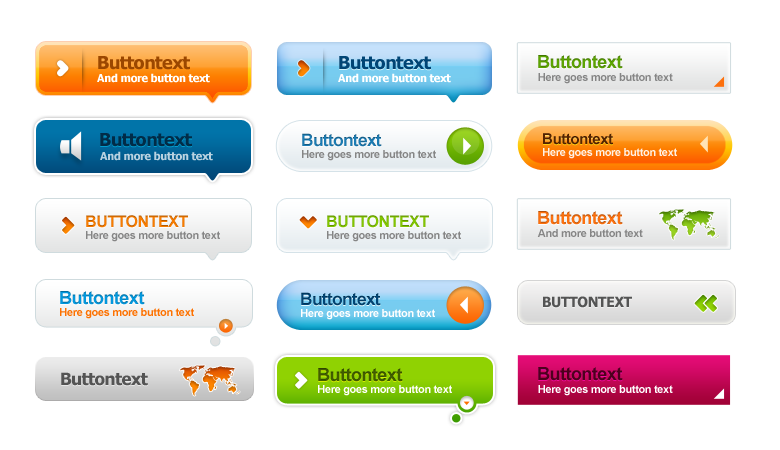
<style>
.page{position:relative;width:780px;height:450px;background:#ffffff}
.page>*{position:absolute;margin:0}
.t1{font:18px "Tahoma-Bold";letter-spacing:-0.03em;color:#9b4700}
.t2{font:18px "Tahoma-Bold";letter-spacing:-0.03em;color:#004575}
.t3{font:18px "Arial-BoldMT";letter-spacing:-0.03em;color:#5ca401}
.t4{font:11px "Tahoma-Bold";letter-spacing:-0.03em;color:#ffffff}
.t5{font:11px "Arial-BoldMT";letter-spacing:-0.03em;color:#858585}
.t6{font:18px "Tahoma-Bold";letter-spacing:-0.03em;color:#003251}
.t7{font:17px "Arial-BoldMT";letter-spacing:-0.03em;color:#1a7bb3}
.t8{font:15px "Arial-BoldMT";letter-spacing:-0.03em;color:#582400}
.t9{font:11px "Arial-BoldMT";letter-spacing:-0.03em;color:#fff1e6}
.t10{font:11px "Tahoma-Bold";letter-spacing:-0.03em;color:#b8d2e0}
.t11{font:16px "Arial-BoldMT";letter-spacing:-0.03em;color:#f87c00}
.t12{font:16px "Arial-BoldMT";letter-spacing:-0.03em;color:#82c600}
.t13{font:18px "Arial-BoldMT";letter-spacing:-0.03em;color:#fd700d}
.t14{font:18px "Arial-BoldMT";letter-spacing:-0.03em;color:#0298de}
.t15{font:17px "Arial-BoldMT";letter-spacing:-0.03em;color:#004575}
.t16{font:14px "Tahoma-Bold";letter-spacing:-0.03em;color:#545454}
.t17{font:11px "Arial-BoldMT";letter-spacing:-0.03em;color:#fd7100}
.t18{font:11px "Arial-BoldMT";letter-spacing:-0.03em;color:#ffffff}
.t19{font:17px "Tahoma-Bold";letter-spacing:-0.03em;color:#545454}
.t20{font:18px "Arial-BoldMT";letter-spacing:-0.03em;color:#405e00}
.t21{font:18px "Arial-BoldMT";letter-spacing:-0.03em;color:#4d001d}
</style>
<div class="page">
<p class="t1" style="left:98px;top:56px;width:92px;height:14px">Buttontext</p>
<p class="t2" style="left:339px;top:56px;width:92px;height:14px">Buttontext</p>
<p class="t3" style="left:538px;top:55px;width:85px;height:14px">Buttontext</p>
<p class="t4" style="left:97px;top:73px;width:113px;height:10px">And more button text</p>
<p class="t4" style="left:338px;top:73px;width:113px;height:10px">And more button text</p>
<p class="t5" style="left:538px;top:73px;width:135px;height:11px">Here goes more button text</p>
<p class="t6" style="left:100px;top:133px;width:92px;height:14px">Buttontext</p>
<p class="t7" style="left:302px;top:133px;width:80px;height:14px">Buttontext</p>
<p class="t8" style="left:543px;top:133px;width:70px;height:12px">Buttontext</p>
<p class="t5" style="left:302px;top:150px;width:134px;height:11px">Here goes more button text</p>
<p class="t9" style="left:543px;top:148px;width:134px;height:11px">Here goes more button text</p>
<p class="t10" style="left:100px;top:151px;width:113px;height:10px">And more button text</p>
<p class="t11" style="left:86px;top:215px;width:102px;height:13px">BUTTONTEXT</p>
<p class="t12" style="left:327px;top:215px;width:102px;height:13px">BUTTONTEXT</p>
<p class="t13" style="left:538px;top:211px;width:85px;height:14px">Buttontext</p>
<p class="t5" style="left:86px;top:231px;width:134px;height:11px">Here goes more button text</p>
<p class="t5" style="left:327px;top:231px;width:134px;height:11px">Here goes more button text</p>
<p class="t5" style="left:537px;top:229px;width:106px;height:8px">And more button text</p>
<p class="t14" style="left:60px;top:291px;width:85px;height:14px">Buttontext</p>
<p class="t15" style="left:301px;top:292px;width:80px;height:14px">Buttontext</p>
<p class="t16" style="left:543px;top:296px;width:89px;height:12px">BUTTONTEXT</p>
<p class="t17" style="left:60px;top:308px;width:134px;height:11px">Here goes more button text</p>
<p class="t18" style="left:301px;top:309px;width:134px;height:11px">Here goes more button text</p>
<p class="t19" style="left:61px;top:372px;width:87px;height:14px">Buttontext</p>
<p class="t20" style="left:318px;top:368px;width:85px;height:14px">Buttontext</p>
<p class="t21" style="left:538px;top:367px;width:85px;height:14px">Buttontext</p>
<p class="t18" style="left:318px;top:385px;width:134px;height:11px">Here goes more button text</p>
<p class="t18" style="left:538px;top:385px;width:135px;height:11px">Here goes more button text</p>
</div>
